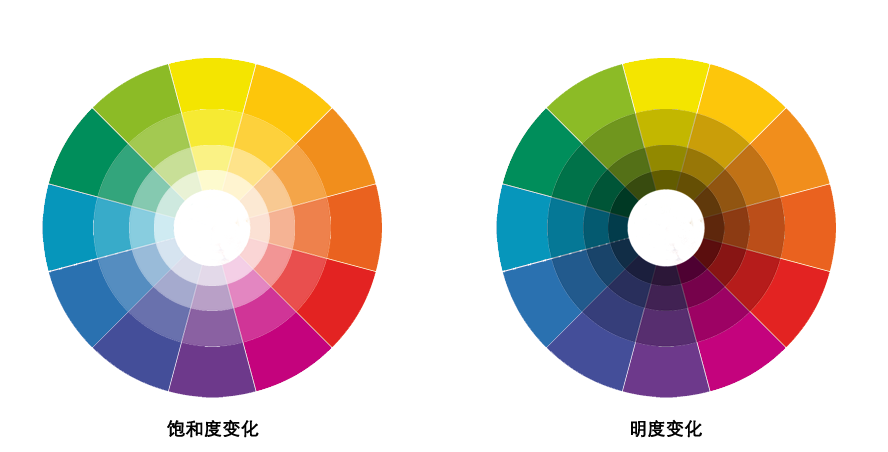
<style>
.page{position:relative;width:888px;height:452px;background:#ffffff}
.page>*{position:absolute;margin:0}
.t1{font:18px "STXihei";color:#020202;font-weight:bold}
</style>
<div class="page">
<p class="t1" style="left:167px;top:419px;width:92px;height:19px">饱和度变化</p>
<p class="t1" style="left:631px;top:419px;width:71px;height:19px">明度变化</p>
</div>
